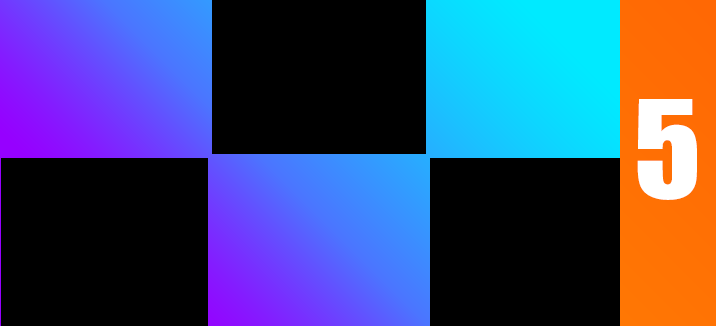
<style>
.page{position:relative;width:716px;height:326px;background:#000000}
.page>*{position:absolute;margin:0}
.t1{font:125px "Impact";color:#ffffff}
</style>
<div class="page">
<p class="t1" style="left:637px;top:99px;width:60px;height:101px">5</p>
</div>
